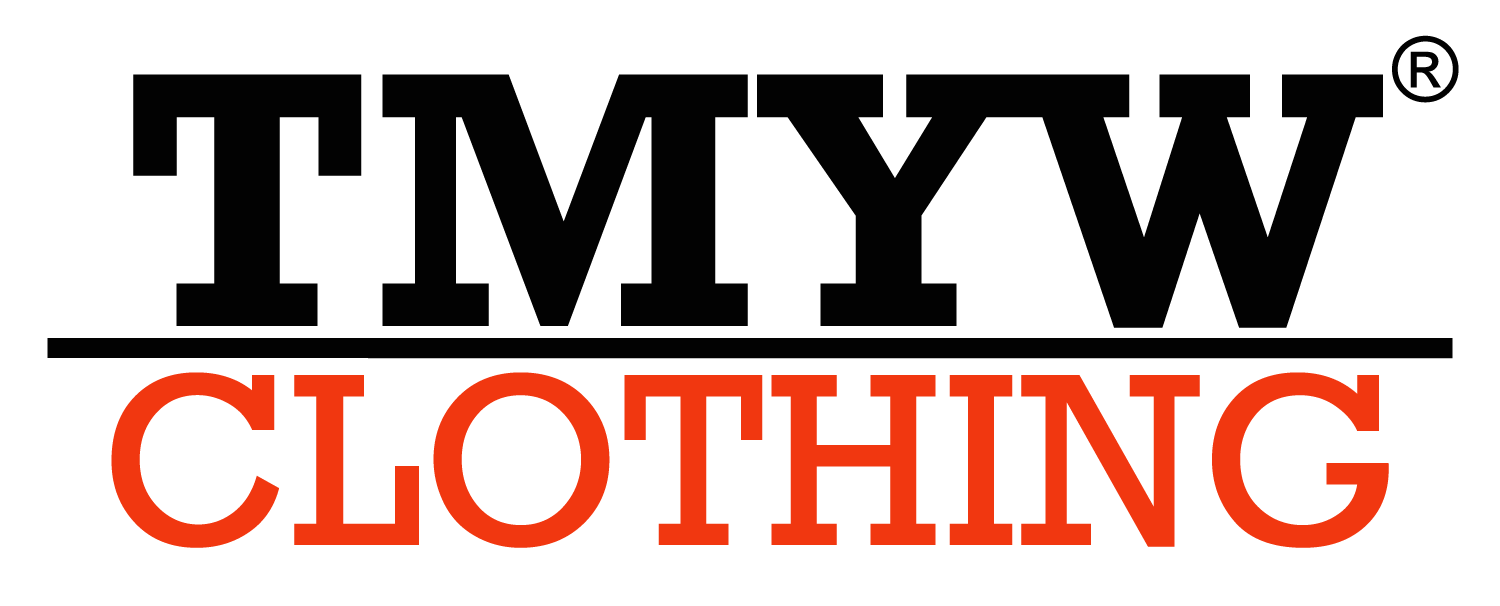
<style>
.page{position:relative;width:1500px;height:606px;background:#ffffff}
.page>*{position:absolute;margin:0}
.t1{font:90px "Rockwell";color:#020202}
.t2{font:370px "Rockwell-Bold";color:#020202}
.t3{font:400px "Rockwell-Bold";color:#020202}
.t4{font:250px "Rockwell";color:#f13710}
</style>
<div class="page">
<p class="t1" style="left:1392px;top:35px;width:67px;height:68px">®</p>
<p class="t2" style="left:133px;top:74px;width:1250px;height:254px">TMYW</p>
<p class="t3" style="left:47px;top:338px;width:1406px;height:21px">_______</p>
<p class="t4" style="left:111px;top:372px;width:1278px;height:176px">CLOTHING</p>
</div>
